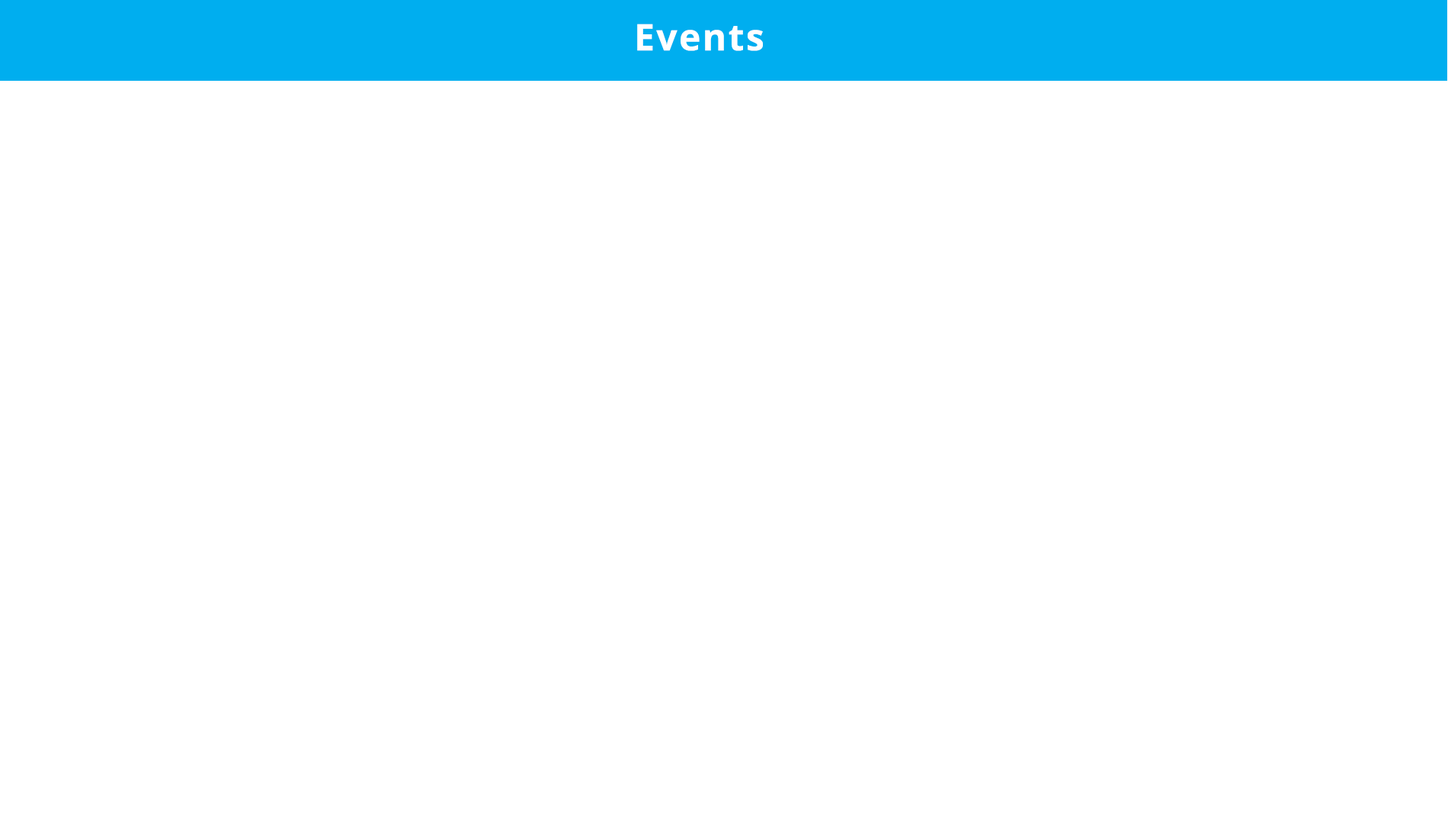
<style>
.page{position:relative;width:1448px;height:823px;background:#ffffff}
.page>*{position:absolute;margin:0}
.t1{font:36.6px "OpenSans-Bold";letter-spacing:0.05em;color:#ffffff}
</style>
<div class="page">
<p class="t1" style="left:637px;top:24px;width:126px;height:27px">Events</p>
</div>
